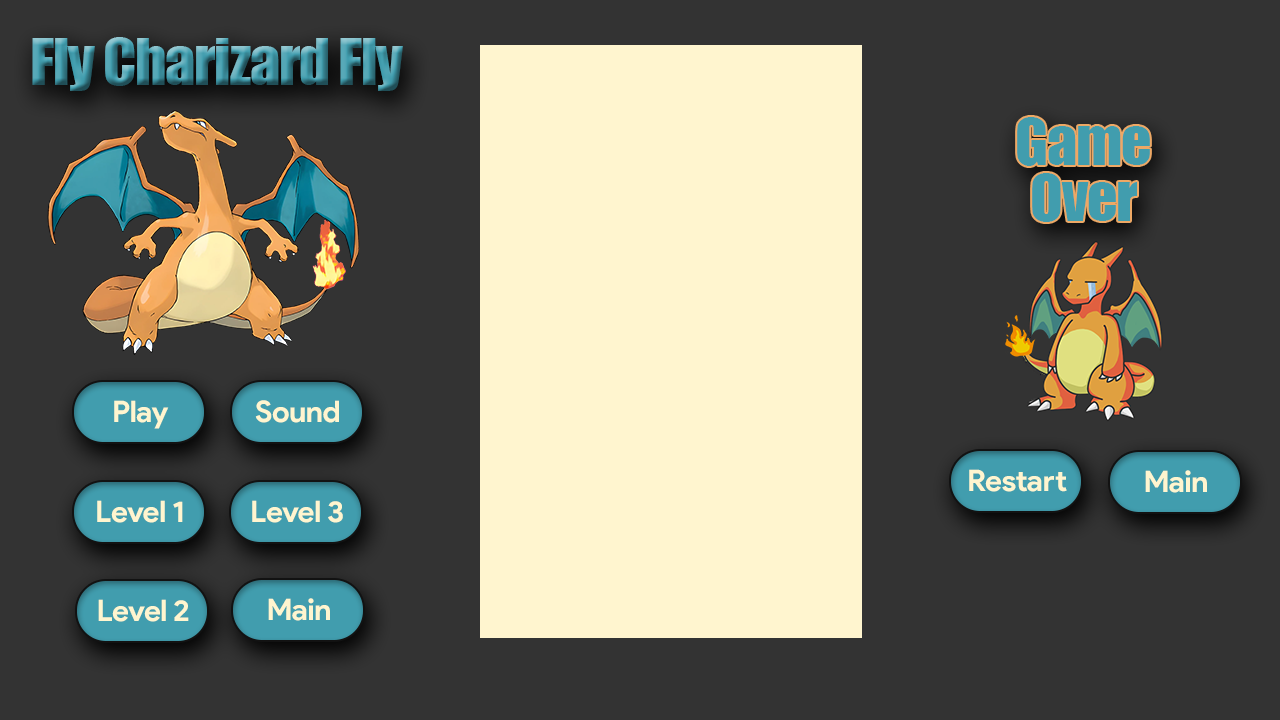
<style>
.page{position:relative;width:1280px;height:720px;background:#333333}
.page>*{position:absolute;margin:0}
.t1{font:60px "Impact";letter-spacing:-0.02em}
.t2{font:60px/56px "Impact";letter-spacing:-0.02em;color:#419dae}
.t3{font:29.7px "ProductSans-Bold";letter-spacing:-0.02em;color:#fff5cf}
</style>
<div class="page">
<p class="t1" style="left:32px;top:37px;width:371px;height:54px">Fly Charizard Fly</p>
<p class="t2" style="left:1017px;top:117px;width:133px;height:105px;text-align:center">Game<br>Over</p>
<p class="t3" style="left:114px;top:400px;width:55px;height:29px">Play</p>
<p class="t3" style="left:255px;top:400px;width:84px;height:23px">Sound</p>
<p class="t3" style="left:969px;top:469px;width:98px;height:23px">Restart</p>
<p class="t3" style="left:1145px;top:470px;width:62px;height:23px">Main</p>
<p class="t3" style="left:97px;top:500px;width:86px;height:23px">Level 1</p>
<p class="t3" style="left:252px;top:500px;width:91px;height:23px">Level 3</p>
<p class="t3" style="left:98px;top:599px;width:91px;height:23px">Level 2</p>
<p class="t3" style="left:268px;top:598px;width:62px;height:23px">Main</p>
</div>
